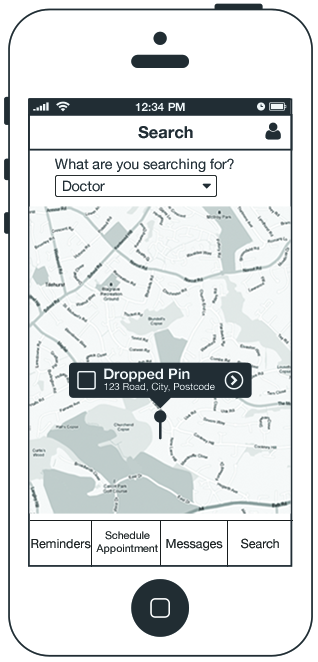
<style>
.page{position:relative;width:318px;height:662px;background:#ffffff}
.page>*{position:absolute;margin:0}
.t1{font:11.6px "HelveticaNeue-Bold";color:#f0f6f8;text-transform:uppercase}
.t2{font:16.6px "HelveticaNeue-Bold";color:#212d34}
.t3{font:14.2px "HelveticaNeue";color:#212d34}
.t4{font:14.7px "HelveticaNeue-Bold";color:#f0f6f8}
.t5{font:9.8px "HelveticaNeue";color:#f0f6f8}
.t6{font:10.7px "HelveticaNeue";color:#1c2223}
.t7{font:12.5px "HelveticaNeue";color:#1c2223}
</style>
<div class="page">
<p class="t1" style="left:135px;top:102px;width:50px;height:9px">12:34 PM</p>
<p class="t2" style="left:138px;top:126px;width:55px;height:13px">Search</p>
<p class="t3" style="left:55px;top:158px;width:179px;height:14px">What are you searching for?</p>
<p class="t3" style="left:63px;top:180px;width:42px;height:12px">Doctor</p>
<p class="t4" style="left:104px;top:368px;width:86px;height:14px">Dropped Pin</p>
<p class="t5" style="left:104px;top:382px;width:111px;height:10px">123 Road, City, Postcode</p>
<p class="t6" style="left:96px;top:531px;width:62px;height:23px;text-align:center">Schedule<br>Appointment</p>
<p class="t7" style="left:31px;top:539px;width:60px;height:10px">Reminders</p>
<p class="t7" style="left:166px;top:539px;width:57px;height:12px">Messages</p>
<p class="t7" style="left:241px;top:538px;width:38px;height:11px">Search</p>
</div>
